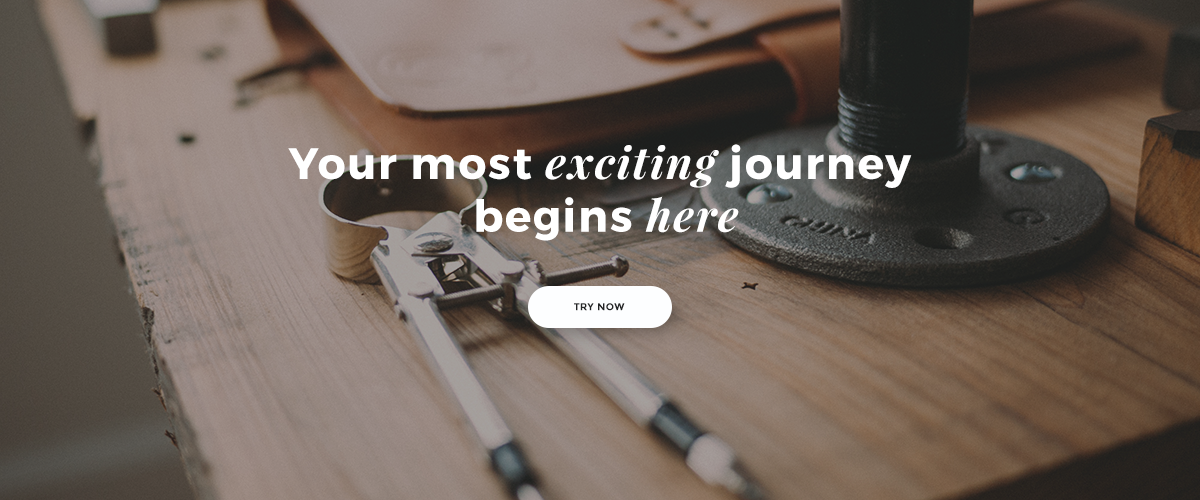
<style>
.page{position:relative;width:1200px;height:500px}
.page>*{position:absolute;margin:0}
.t1{font:44px "Montserrat-Bold";letter-spacing:0.04em;color:#ffffff}
.t2{font:44px "PlayfairDisplay-BoldItalic";letter-spacing:0.04em;color:#ffffff}
.t3{font:10px "Montserrat-Bold";letter-spacing:0.04em;color:#242526;text-transform:uppercase}
</style>
<div class="page">
<p class="t1" style="left:288px;top:144px;width:624px;height:97px;text-align:center">Your most <span class="t2">exciting</span> journey <br>begins <span class="t2">here</span></p>
<p class="t3" style="left:574px;top:303px;width:51px;height:8px">Try now</p>
</div>
